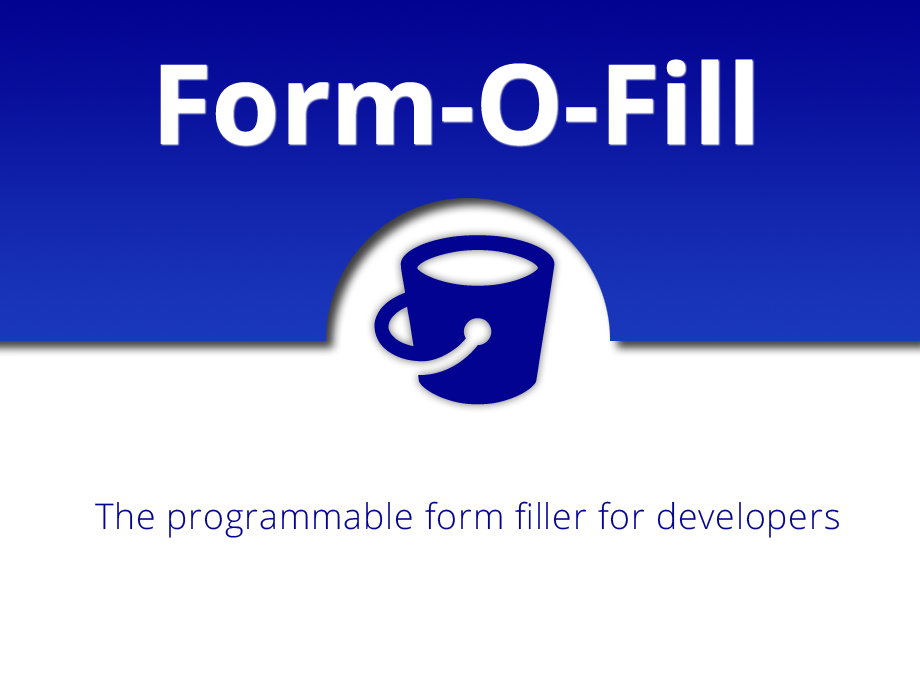
<style>
.page{position:relative;width:920px;height:680px;background:#ffffff}
.page>*{position:absolute;margin:0}
.t1{font:110.7px "OpenSans-Bold";color:#ffffff}
.t2{font:35.5px "OpenSans-Light";letter-spacing:0.025em;color:#030392}
</style>
<div class="page">
<p class="t1" style="left:160px;top:59px;width:593px;height:87px">Form-O-Fill</p>
<p class="t2" style="left:95px;top:501px;width:744px;height:37px">The programmable form filler for developers</p>
</div>
